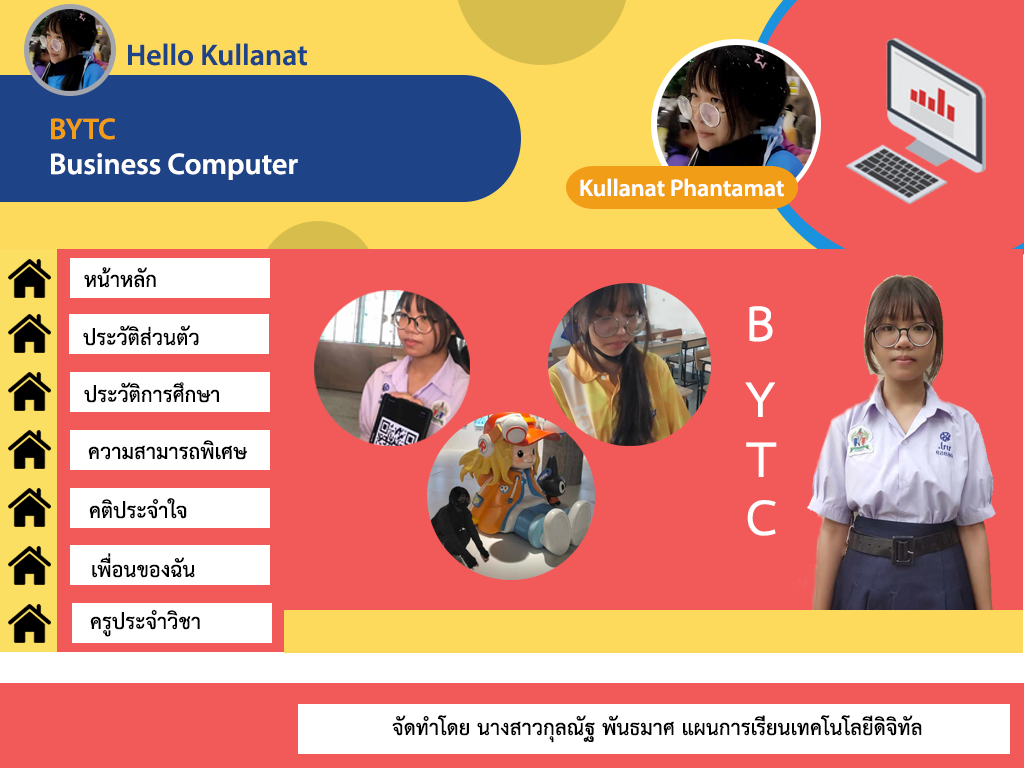
<style>
.page{position:relative;width:1024px;height:768px;background:#f25a59}
.page>*{position:absolute;margin:0}
.t1{font:30px "MyriadPro-Semibold";color:#1f4387}
.t2{font:30px "MyriadPro-Semibold";color:#f29d18}
.t3{font:30px "MyriadPro-Semibold";color:#ffffff}
.t4{font:24px "MyriadPro-Semibold";color:#ffffff}
.t5{font:30px "THSarabunITù-Bold";color:#000000}
.t6{font:72px "THSarabunITù-Bold";color:#ffffff}
.t7{font:30px "THSarabunITù-Bold";color:#010100}
</style>
<div class="page">
<p class="t1" style="left:128px;top:43px;width:179px;height:23px">Hello Kullanat</p>
<p class="t2" style="left:51px;top:118px;width:64px;height:22px">BYTC</p>
<p class="t3" style="left:51px;top:153px;width:247px;height:27px">Business Computer</p>
<p class="t4" style="left:580px;top:178px;width:204px;height:19px">Kullanat Phantamat</p>
<p class="t5" style="left:84px;top:267px;width:72px;height:21px">หน้าหลัก</p>
<p class="t6" style="left:749px;top:306px;width:24px;height:36px">B</p>
<p class="t5" style="left:83px;top:325px;width:116px;height:21px">ประวัติส่วนตัว</p>
<p class="t5" style="left:84px;top:382px;width:135px;height:21px">ประวัติการศึกษา</p>
<p class="t6" style="left:745px;top:382px;width:30px;height:35px">Y</p>
<p class="t5" style="left:88px;top:440px;width:160px;height:20px">ความสามารถพิเศษ</p>
<p class="t6" style="left:746px;top:442px;width:31px;height:35px">T</p>
<p class="t5" style="left:89px;top:498px;width:98px;height:21px">คติประจำใจ</p>
<p class="t6" style="left:747px;top:500px;width:29px;height:36px">C</p>
<p class="t5" style="left:92px;top:553px;width:103px;height:25px">เพื่อนของฉัน</p>
<p class="t5" style="left:90px;top:609px;width:110px;height:28px">ครูประจำวิชา</p>
<p class="t7" style="left:392px;top:715px;width:530px;height:28px">จัดทำโดย นางสาวกุลณัฐ พันธมาศ แผนการเรียนเทคโนโลยีดิจิทัล</p>
</div>
